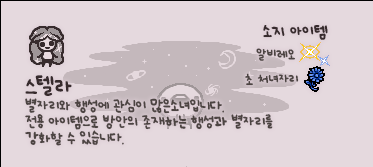
<style>
.page{position:relative;width:373px;height:167px;background:#e5d9de}
.page>*{position:absolute;margin:0}
.t1{font:12px "UhBeeSe_hyunBold";color:#372b2d}
.t2{font:12px "UhBeeSe_hyunBold";letter-spacing:-0.1em;color:#372b2d}
.t3{font:10px "UhBeeSe_hyunBold";color:#4c4442}
.t4{font:11px/16px "UhBeeSe_hyunBold";letter-spacing:-0.025em;color:#4c4442}
.t5{font:16px/23px "UhBeeSe_hyunBold";letter-spacing:-0.15em;color:#372b2d}
.t6{font:16px/23px "UhBeeSe_hyunBold";color:#372b2d}
.t7{font:10px "UhBeeSe_hyunBold";letter-spacing:-0.1em;color:#4c4442}
</style>
<div class="page">
<p class="t1" style="left:263px;top:25px;width:65px;height:15px"><span class="t2">소</span>지 아이템</p>
<p class="t3" style="left:256px;top:48px;width:39px;height:13px">알비레오</p>
<p class="t4" style="left:25px;top:75px;width:248px;height:71px"><span class="t5">스</span><span class="t6">텔라<br></span>별자리와 행성에 관심이 많은소녀입니다. <br>전용 아이템으로 방안의 존재하는 행성과 별자리를<br>강화할 수 있습니다.</p>
<p class="t3" style="left:245px;top:73px;width:54px;height:13px">초 처녀<span class="t7">자</span>리</p>
</div>
